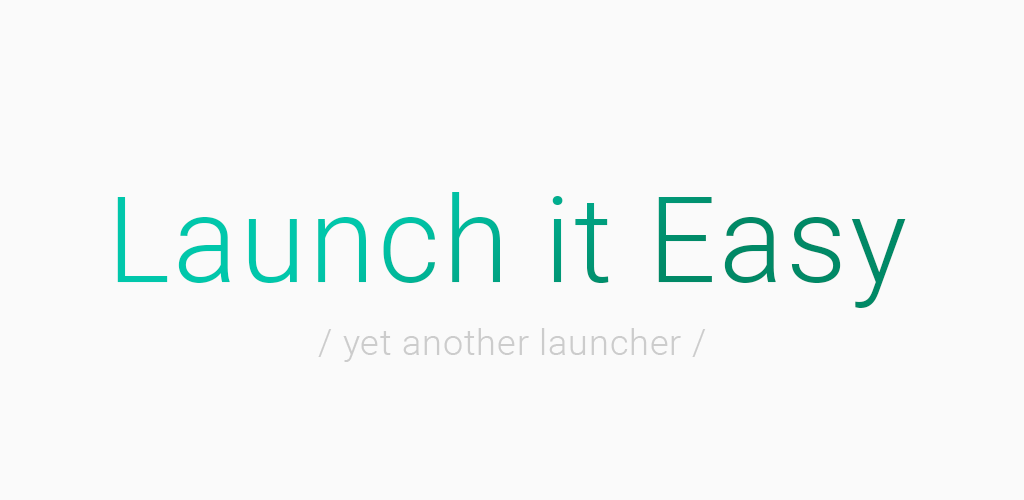
<style>
.page{position:relative;width:1024px;height:500px;background:#fafafa}
.page>*{position:absolute;margin:0}
.t1{font:120px "Roboto-Light";letter-spacing:0.025em}
.t2{font:36px "Roboto-Light";letter-spacing:0.025em;color:#cccccc}
</style>
<div class="page">
<p class="t1" style="left:117px;top:192px;width:789px;height:116px">Launch it Easy</p>
<p class="t2" style="left:318px;top:328px;width:388px;height:34px">/ yet another launcher /</p>
</div>
